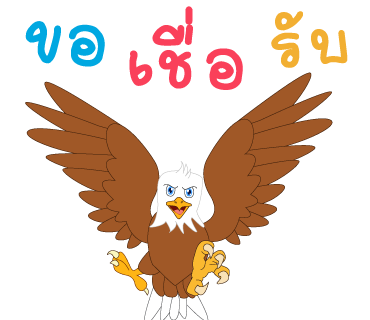
<style>
.page{position:relative;width:370px;height:320px;background:#ffffff}
.page>*{position:absolute;margin:0}
.t1{font:108px "2005_iannnnnMTV";letter-spacing:0.025em;color:#fa405a;scale:1.06 1}
.t2{font:98px "2005_iannnnnMTV";letter-spacing:0.025em;color:#f2af32;scale:1.06 1}
.t3{font:108px "2005_iannnnnMTV";letter-spacing:0.025em;color:#00a8e1;scale:1.06 1}
</style>
<div class="page">
<p class="t1" style="left:129px;top:6px;width:114px;height:84px">เชื่อ</p>
<p class="t2" style="left:271px;top:11px;width:77px;height:57px;rotate:-6deg">รับ</p>
<p class="t3" style="left:25px;top:21px;width:80px;height:46px;rotate:4deg">ขอ</p>
</div>
